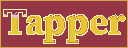
<style>
.page{position:relative;width:128px;height:48px;background:#943647}
.page>*{position:absolute;margin:0}
.t1{font:37px "SourceSerifRoman-Bold";color:#eac534}
</style>
<div class="page">
<p class="t1" style="left:3px;top:9px;width:123px;height:34px">Tapper</p>
</div>
